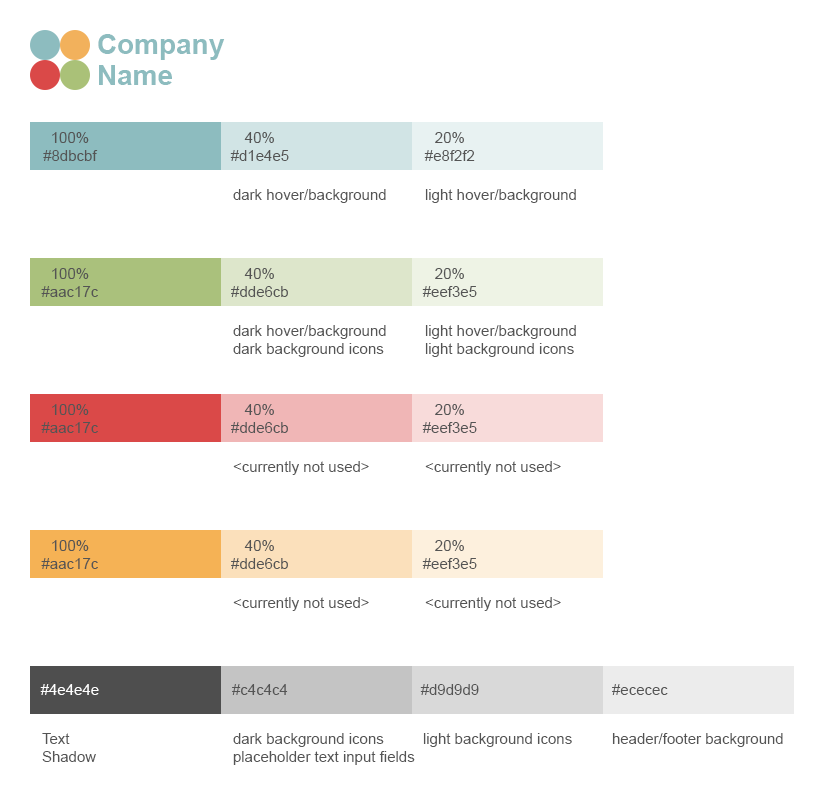
<style>
.page{position:relative;width:824px;height:786px;background:#ffffff}
.page>*{position:absolute;margin:0}
.t1{font:28px/31px "Arial-BoldMT";color:#8dbcbf}
.t2{font:15px "ArialMT";color:#545454}
.t3{font:15px "ArialMT";color:#ffffff}
</style>
<div class="page">
<p class="t1" style="left:98px;top:34px;width:127px;height:51px">Company<br>Name</p>
<p class="t2" style="left:43px;top:132px;width:55px;height:29px;text-align:center">100%<br>#8dbcbf</p>
<p class="t2" style="left:230px;top:132px;width:59px;height:29px;text-align:center">40%<br>#d1e4e5</p>
<p class="t2" style="left:424px;top:132px;width:51px;height:29px;text-align:center">20%<br>#e8f2f2</p>
<p class="t2" style="left:233px;top:189px;width:153px;height:14px">dark hover/background</p>
<p class="t2" style="left:425px;top:189px;width:151px;height:14px">light hover/background</p>
<p class="t2" style="left:41px;top:268px;width:57px;height:29px;text-align:center">100%<br>#aac17c</p>
<p class="t2" style="left:231px;top:268px;width:57px;height:29px;text-align:center">40%<br>#dde6cb</p>
<p class="t2" style="left:422px;top:268px;width:55px;height:29px;text-align:center">20%<br>#eef3e5</p>
<p class="t2" style="left:233px;top:325px;width:153px;height:32px">dark hover/background<br>dark background icons</p>
<p class="t2" style="left:425px;top:325px;width:151px;height:32px">light hover/background<br>light background icons</p>
<p class="t2" style="left:41px;top:404px;width:57px;height:29px;text-align:center">100%<br>#aac17c</p>
<p class="t2" style="left:231px;top:404px;width:57px;height:29px;text-align:center">40%<br>#dde6cb</p>
<p class="t2" style="left:422px;top:404px;width:55px;height:29px;text-align:center">20%<br>#eef3e5</p>
<p class="t2" style="left:233px;top:461px;width:136px;height:14px">&lt;currently not used&gt;</p>
<p class="t2" style="left:425px;top:461px;width:136px;height:14px">&lt;currently not used&gt;</p>
<p class="t2" style="left:41px;top:540px;width:57px;height:29px;text-align:center">100%<br>#aac17c</p>
<p class="t2" style="left:231px;top:540px;width:57px;height:29px;text-align:center">40%<br>#dde6cb</p>
<p class="t2" style="left:422px;top:540px;width:55px;height:29px;text-align:center">20%<br>#eef3e5</p>
<p class="t2" style="left:233px;top:597px;width:136px;height:14px">&lt;currently not used&gt;</p>
<p class="t2" style="left:425px;top:597px;width:136px;height:14px">&lt;currently not used&gt;</p>
<p class="t3" style="left:40px;top:684px;width:59px;height:11px">#4e4e4e</p>
<p class="t2" style="left:232px;top:684px;width:56px;height:11px">#c4c4c4</p>
<p class="t2" style="left:420px;top:684px;width:59px;height:11px">#d9d9d9</p>
<p class="t2" style="left:612px;top:684px;width:56px;height:11px">#ececec</p>
<p class="t2" style="left:42px;top:733px;width:54px;height:29px">Text<br>Shadow</p>
<p class="t2" style="left:233px;top:733px;width:182px;height:32px">dark background icons<br>placeholder text input fields</p>
<p class="t2" style="left:423px;top:733px;width:149px;height:14px">light background icons</p>
<p class="t2" style="left:612px;top:733px;width:171px;height:14px">header/footer background</p>
</div>
